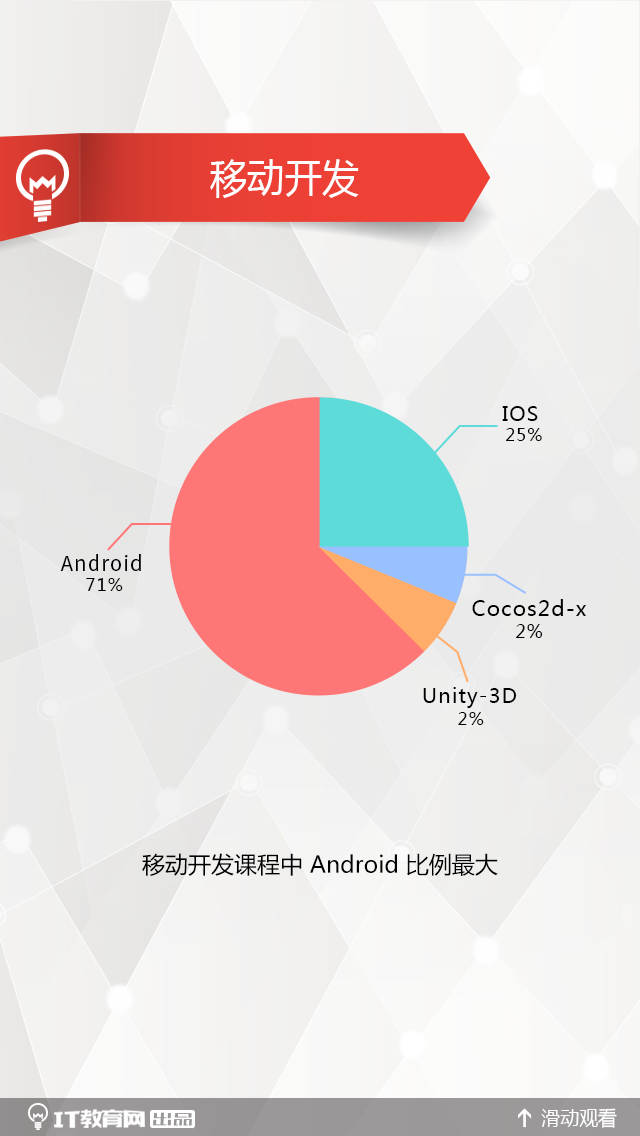
<style>
.page{position:relative;width:640px;height:1136px}
.page>*{position:absolute;margin:0}
.t1{font:40px "MicrosoftYaHei";color:#ffffff;scale:0.93 1}
.t2{font:20.4px "MicrosoftYaHei";letter-spacing:0.05em;color:#000000}
.t3{font:17.5px "MicrosoftYaHei";letter-spacing:0.05em;color:#000000}
.t4{font:20.4px "NotoSansHans-Regular";letter-spacing:0.05em;color:#000000}
.t5{font:21px "MicrosoftYaHei";letter-spacing:0.05em;color:#000000}
.t6{font:18px "MicrosoftYaHei";letter-spacing:0.05em;color:#000000}
.t7{font:23px "MicrosoftYaHei";color:#000000}
.t8{font:20.2px "MicrosoftYaHei";color:#ffffff;scale:0.94 1}
</style>
<div class="page">
<p class="t1" style="left:210px;top:159px;width:149px;height:39px">移动开发</p>
<p class="t2" style="left:502px;top:406px;width:36px;height:15px">IOS</p>
<p class="t3" style="left:506px;top:428px;width:36px;height:13px">25%</p>
<p class="t4" style="left:60px;top:554px;width:81px;height:17px">Android</p>
<p class="t3" style="left:86px;top:578px;width:37px;height:13px">71%</p>
<p class="t5" style="left:472px;top:599px;width:114px;height:17px">Cocos2d-x</p>
<p class="t6" style="left:516px;top:624px;width:27px;height:14px">2%</p>
<p class="t2" style="left:423px;top:687px;width:94px;height:21px">Unity-3D</p>
<p class="t3" style="left:458px;top:712px;width:26px;height:13px">2%</p>
<p class="t7" style="left:142px;top:853px;width:356px;height:23px">移动开发课程中 Android 比例最大</p>
<p class="t8" style="left:541px;top:1108px;width:76px;height:20px">滑动观看</p>
</div>
